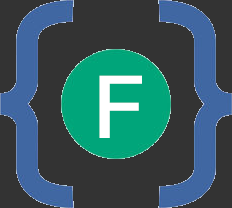
<style>
.page{position:relative;width:232px;height:208px;background:#333333}
.page>*{position:absolute;margin:0}
.t1{font:85.6px "Inter-Medium";letter-spacing:0.1em;color:#ffffff;scale:1.1 1}
</style>
<div class="page">
<p class="t1" style="left:99px;top:75px;width:43px;height:63px">F</p>
</div>
